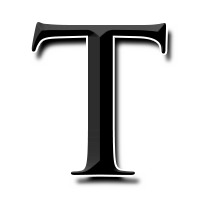
<style>
.page{position:relative;width:200px;height:200px;background:#ffffff}
.page>*{position:absolute;margin:0}
.t1{font:199.3px "TrajanPro-Bold";color:#000000}
</style>
<div class="page">
<p class="t1" style="left:31px;top:22px;width:135px;height:153px">T</p>
</div>
